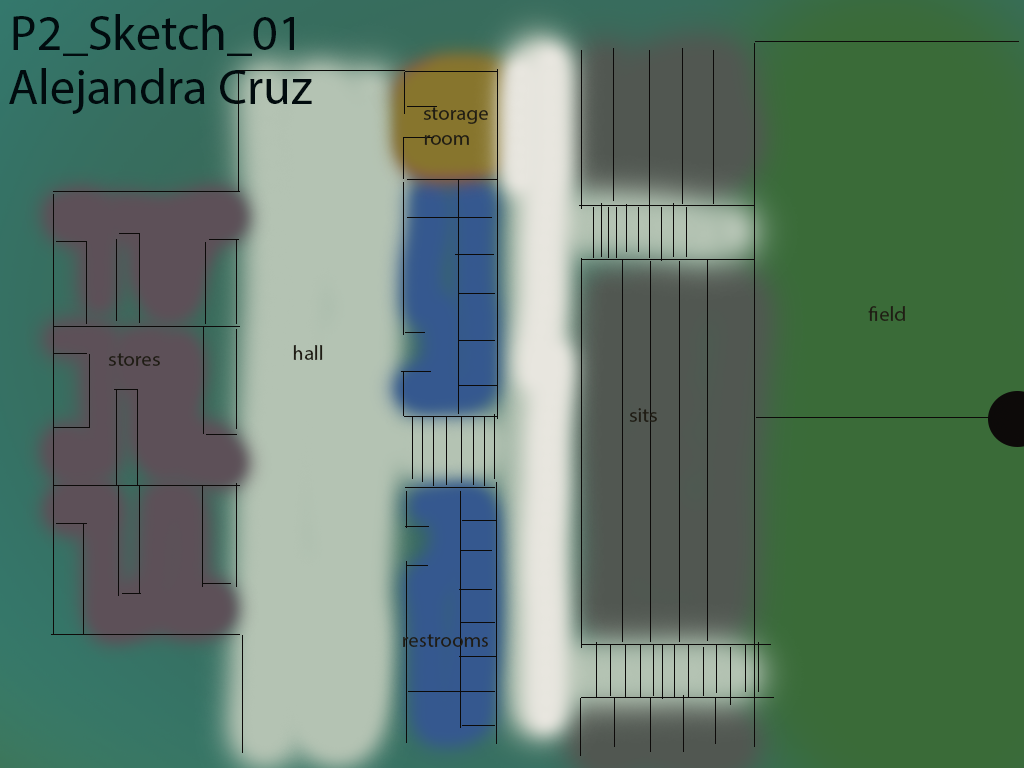
<style>
.page{position:relative;width:1024px;height:768px}
.page>*{position:absolute;margin:0}
.t1{font:50px "MyriadPro-Regular";color:#010b0e}
.t2{font:12px "MyriadPro-Regular";color:#010b0e}
.t3{font:20.8px "MyriadPro-Regular";color:#201d14}
</style>
<div class="page">
<p class="t1" style="left:13px;top:14px;width:281px;height:42px">P2_Sketch_01</p>
<p class="t2" style="left:9px;top:68px;width:303px;height:46px">Alejandra Cruz</p>
<p class="t3" style="left:423px;top:107px;width:65px;height:38px">storage<br>room</p>
<p class="t3" style="left:868px;top:306px;width:37px;height:15px">field</p>
<p class="t3" style="left:108px;top:353px;width:52px;height:13px">stores</p>
<p class="t3" style="left:293px;top:345px;width:30px;height:15px">hall</p>
<p class="t3" style="left:629px;top:408px;width:28px;height:14px">sits</p>
<p class="t3" style="left:403px;top:634px;width:85px;height:13px">restrooms</p>
</div>
